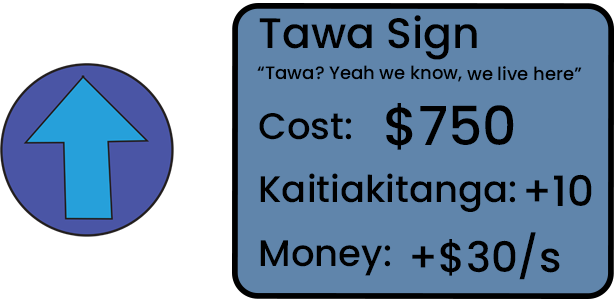
<style>
.page{position:relative;width:614px;height:302px;background:#6085ab}
.page>*{position:absolute;margin:0}
.t1{font:42.6px "Poppins-Medium";color:#000000}
.t2{font:18px "Poppins-Medium";color:#000000}
.t3{font:37px "Poppins-Medium";color:#000000}
.t4{font:53.7px "Poppins-Medium";color:#000000}
.t5{font:42px "Poppins-Medium";color:#000000}
</style>
<div class="page">
<p class="t1" style="left:259px;top:15px;width:218px;height:45px">Tawa Sign</p>
<p class="t2" style="left:257px;top:65px;width:325px;height:17px">“Tawa? Yeah we know, we live here”</p>
<p class="t3" style="left:259px;top:113px;width:93px;height:27px">Cost:</p>
<p class="t4" style="left:386px;top:103px;width:128px;height:47px">$750</p>
<p class="t3" style="left:260px;top:173px;width:256px;height:39px">Kaitiakitanga:</p>
<p class="t5" style="left:526px;top:174px;width:66px;height:32px">+10</p>
<p class="t5" style="left:412px;top:232px;width:148px;height:48px">+$30/s</p>
<p class="t3" style="left:260px;top:240px;width:131px;height:36px">Money:</p>
</div>
